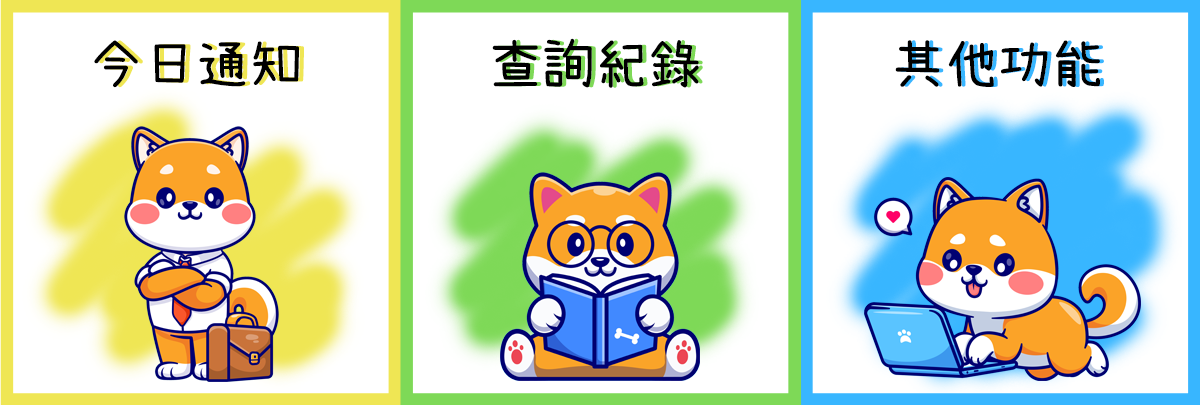
<style>
.page{position:relative;width:1200px;height:405px;background:#ffffff}
.page>*{position:absolute;margin:0}
.t1{font:53.3px "SetoFont";color:#000000}
.t2{font:53.3px "SetoFont"}
</style>
<div class="page">
<p class="t1" style="left:94px;top:40px;width:205px;height:48px">今日通知</p>
<p class="t2" style="left:99px;top:40px;width:205px;height:48px">今日通知</p>
<p class="t1" style="left:492px;top:38px;width:207px;height:50px">查詢紀錄</p>
<p class="t2" style="left:496px;top:38px;width:207px;height:50px">查詢紀錄</p>
<p class="t1" style="left:895px;top:40px;width:205px;height:47px">其他功能</p>
<p class="t2" style="left:899px;top:40px;width:205px;height:47px">其他功能</p>
</div>
